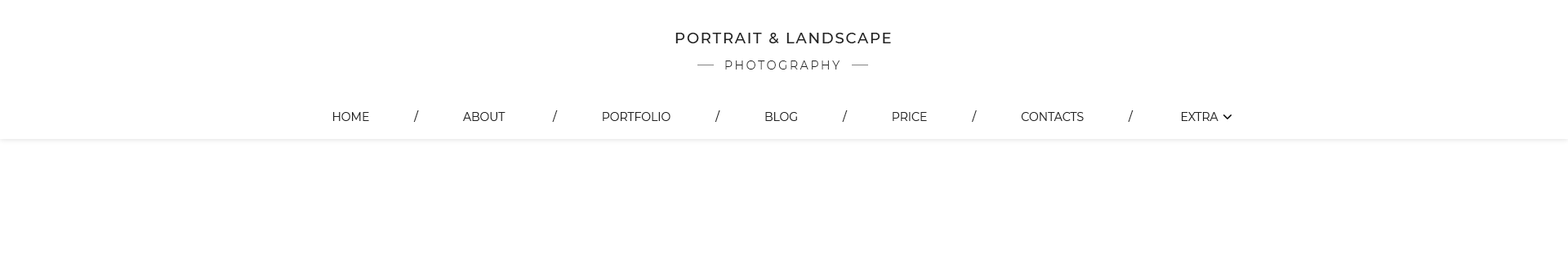
<style>
.page{position:relative;width:1568px;height:278px;background:#ffffff}
.page>*{position:absolute;margin:0}
.t1{font:14.7px "Montserrat-Medium";letter-spacing:0.1em;color:#222222;text-transform:uppercase}
.t2{font:11.4px "Montserrat-Light";letter-spacing:0.2em;color:#222222;text-transform:uppercase}
.t3{font:11.4px "Montserrat-Regular";color:#222222;text-transform:uppercase}
</style>
<div class="page">
<p class="t1" style="left:675px;top:33px;width:216px;height:10px">Portrait &amp; LANDSCAPE</p>
<p class="t2" style="left:725px;top:60px;width:115px;height:9px">Photography</p>
<p class="t3" style="left:333px;top:110px;width:885px;height:12px">home               /               About                /               portfolio               /               Blog               /               price               /               contaсts               /                Extra</p>
</div>
